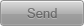
<style>
.page{position:relative;width:84px;height:27px}
.page>*{position:absolute;margin:0}
.t1{font:13px "ArialMT";color:#686868}
</style>
<div class="page">
<p class="t1" style="left:27px;top:8px;width:30px;height:10px">Send</p>
</div>
